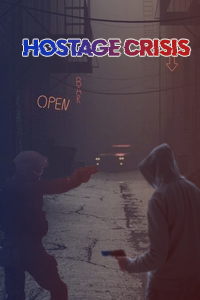
<style>
.page{position:relative;width:200px;height:300px}
.page>*{position:absolute;margin:0}
.t1{font:18px "DoctorGlitch"}
</style>
<div class="page">
<p class="t1" style="left:22px;top:39px;width:169px;height:17px">hostage crisis</p>
</div>
